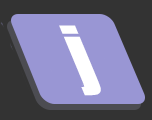
<style>
.page{position:relative;width:152px;height:120px;background:#9996d4}
.page>*{position:absolute;margin:0}
.t1{font:85.7px "Impact";color:#ffffff;scale:0.91 1}
</style>
<div class="page">
<p class="t1" style="left:59px;top:25px;width:42px;height:71px">j</p>
</div>
